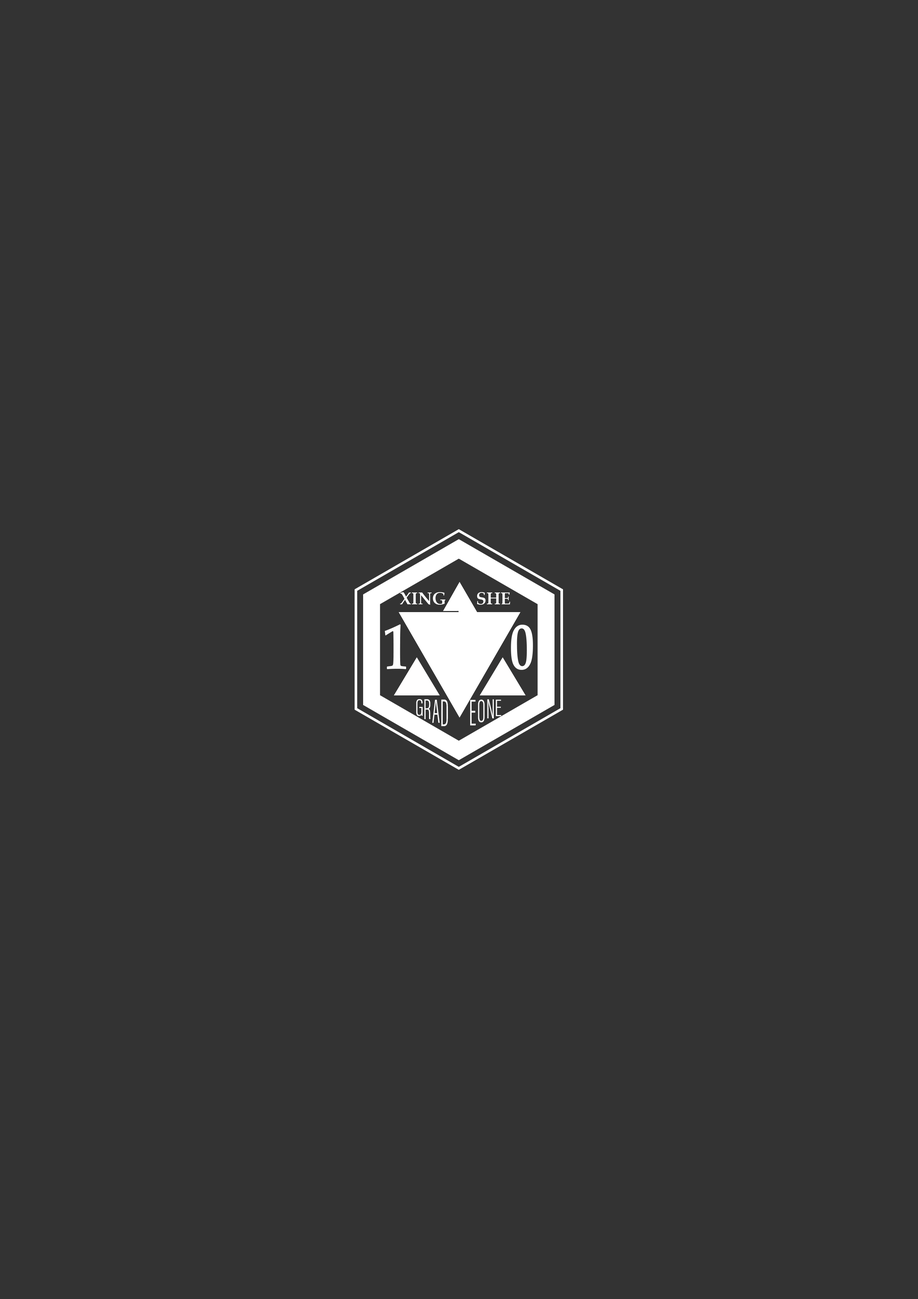
<style>
.page{position:relative;width:918px;height:1299px;background:#333333}
.page>*{position:absolute;margin:0}
.t1{font:17px "PalatinoLinotype-Bold";color:#fefefe}
.t2{font:24.7px "AcuminConcept-ExtraCondensedLight";color:#fefefe}
.t3{font:29.8px "AcuminConcept-ExtraCondensedLight";color:#fefefe;scale:0.83 1}
.t4{font:34.5px "AcuminConcept-ExtraCondensedLight";color:#fefefe;scale:0.72 1}
.t5{font:39.7px "AcuminConcept-ExtraCondensedLight";color:#fefefe;scale:0.62 1}
.t6{font:38.2px "AcuminConcept-ExtraCondensedLight";color:#fefefe;scale:0.65 1}
.t7{font:33.2px "AcuminConcept-ExtraCondensedLight";color:#fefefe;scale:0.74 1}
.t8{font:28.5px "AcuminConcept-ExtraCondensedLight";color:#fefefe;scale:0.87 1}
</style>
<div class="page">
<p class="t1" style="left:400px;top:592px;width:111px;height:13px">XING       SHE</p>
<p class="t2" style="left:416px;top:699px;width:7px;height:17px">G</p>
<p class="t3" style="left:424px;top:699px;width:7px;height:20px">R</p>
<p class="t4" style="left:432px;top:699px;width:8px;height:24px">A</p>
<p class="t5" style="left:441px;top:699px;width:7px;height:27px">D</p>
<p class="t6" style="left:470px;top:700px;width:6px;height:25px">E</p>
<p class="t7" style="left:478px;top:699px;width:7px;height:23px">O</p>
<p class="t8" style="left:487px;top:699px;width:7px;height:19px">N</p>
<p class="t2" style="left:496px;top:699px;width:6px;height:17px">E</p>
</div>
